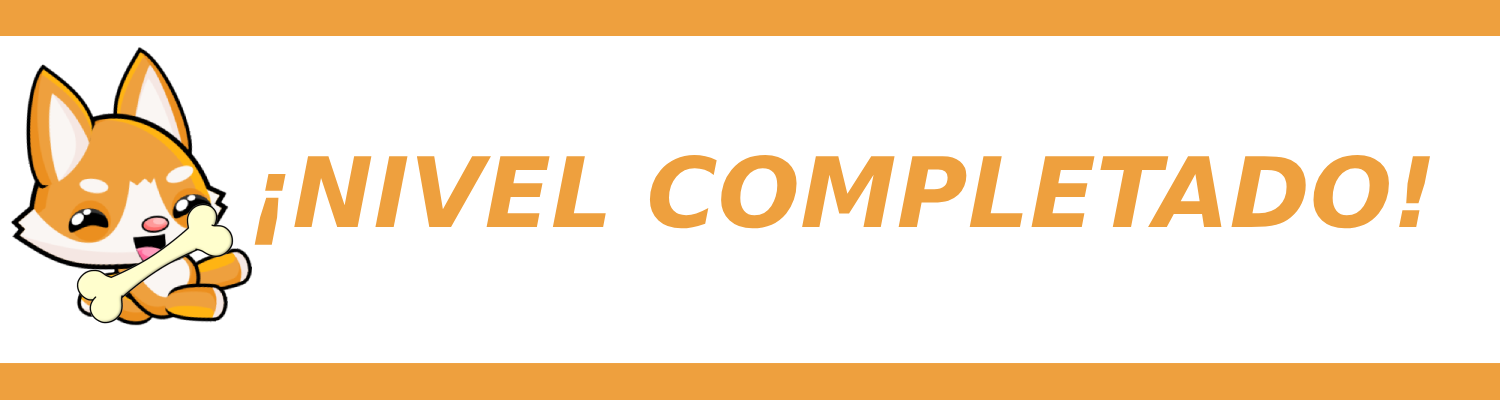
<style>
.page{position:relative;width:1500px;height:400px;background:#ffffff}
.page>*{position:absolute;margin:0}
.t1{font:97px "DejaVuSans-BoldOblique";color:#eea03e}
</style>
<div class="page">
<p class="t1" style="left:254px;top:155px;width:1176px;height:90px">¡NIVEL COMPLETADO!</p>
</div>
